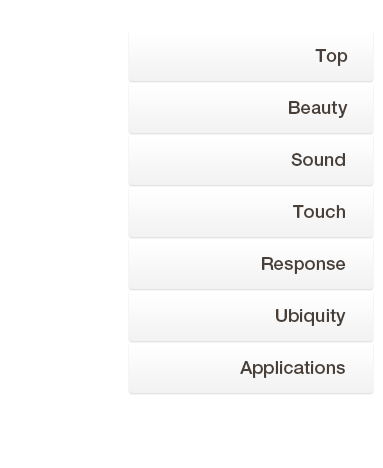
<style>
.page{position:relative;width:383px;height:468px;background:#ffffff}
.page>*{position:absolute;margin:0}
.t1{font:18px "HelveticaNeueLTStd-Md";letter-spacing:0.01em;color:#493f39}
</style>
<div class="page">
<p class="t1" style="left:315px;top:49px;width:33px;height:17px">Top</p>
<p class="t1" style="left:289px;top:101px;width:59px;height:17px">Beauty</p>
<p class="t1" style="left:291px;top:153px;width:54px;height:13px">Sound</p>
<p class="t1" style="left:293px;top:205px;width:52px;height:13px">Touch</p>
<p class="t1" style="left:262px;top:257px;width:84px;height:17px">Response</p>
<p class="t1" style="left:276px;top:309px;width:70px;height:17px">Ubiquity</p>
<p class="t1" style="left:240px;top:361px;width:105px;height:17px">Applications</p>
</div>
